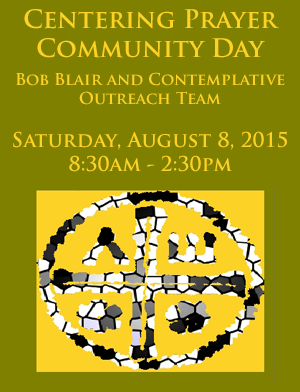
<style>
.page{position:relative;width:300px;height:392px;background:#7f8000}
.page>*{position:absolute;margin:0}
.t1{font:16px/19px "TrajanPro-Bold";color:#fcd226}
.t2{font:25px/29px "TrajanPro-Bold";color:#fcd226}
.t3{font:20px/24px "TrajanPro-Bold";color:#fcd226}
</style>
<div class="page">
<p class="t1" style="left:13px;top:9px;width:274px;height:163px;text-align:center"><span class="t2">Centering Prayer Community Day<br><br></span>Bob Blair and Contemplative Outreach Team<br><br><span class="t3">Saturday, August 8, 2015<br>8:30am - 2:30pm</span></p>
</div>
